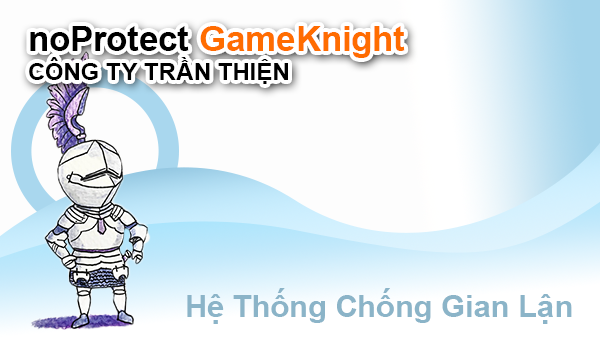
<style>
.page{position:relative;width:600px;height:350px;background:#fdfdfd}
.page>*{position:absolute;margin:0}
.t1{font:24px "Arial-BoldMT";color:#000000}
.t2{font:35px "Arial-BoldMT";color:#000000}
.t3{font:35px "Arial-BoldMT";color:#ff6c00}
.t4{font:31px "Arial-BoldMT";color:#8bb4c8}
</style>
<div class="page">
<p class="t1" style="left:29px;top:26px;width:376px;height:58px"><span class="t2">noProtect </span><span class="t3">GameKnight<br></span>CÔNG TY TRẦN THIỆN</p>
<p class="t4" style="left:187px;top:288px;width:385px;height:36px">Hệ Thống Chống Gian Lận</p>
</div>
